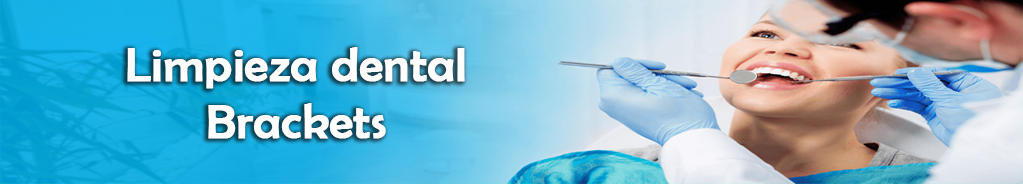
<style>
.page{position:relative;width:1023px;height:184px}
.page>*{position:absolute;margin:0}
.t1{font:47.8px "BerlinSansFB-Reg";color:#fffefe;font-weight:bold}
</style>
<div class="page">
<p class="t1" style="left:127px;top:47px;width:338px;height:92px;text-align:center">Limpieza dental<br>Brackets</p>
</div>
